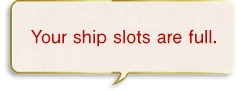
<style>
.page{position:relative;width:237px;height:91px}
.page>*{position:absolute;margin:0}
.t1{font:18px "FutoGoB101Pr5-Bold";color:#bd0800}
</style>
<div class="page">
<p class="t1" style="left:30px;top:29px;width:186px;height:18px">Your ship slots are full.</p>
</div>
